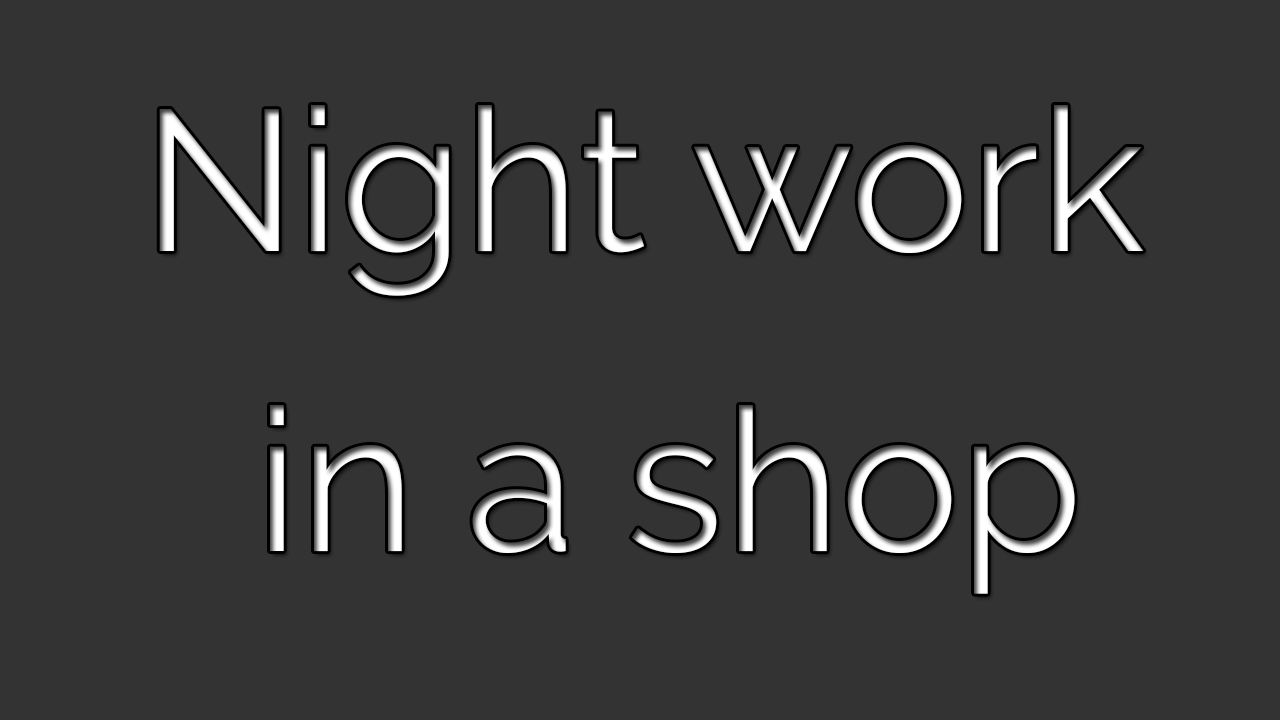
<style>
.page{position:relative;width:1280px;height:720px;background:#333333}
.page>*{position:absolute;margin:0}
.t1{font:200px/300px "Raleway-Regular"}
</style>
<div class="page">
<p class="t1" style="left:159px;top:105px;width:985px;height:489px;text-align:center">Night work <br>in a shop</p>
</div>
